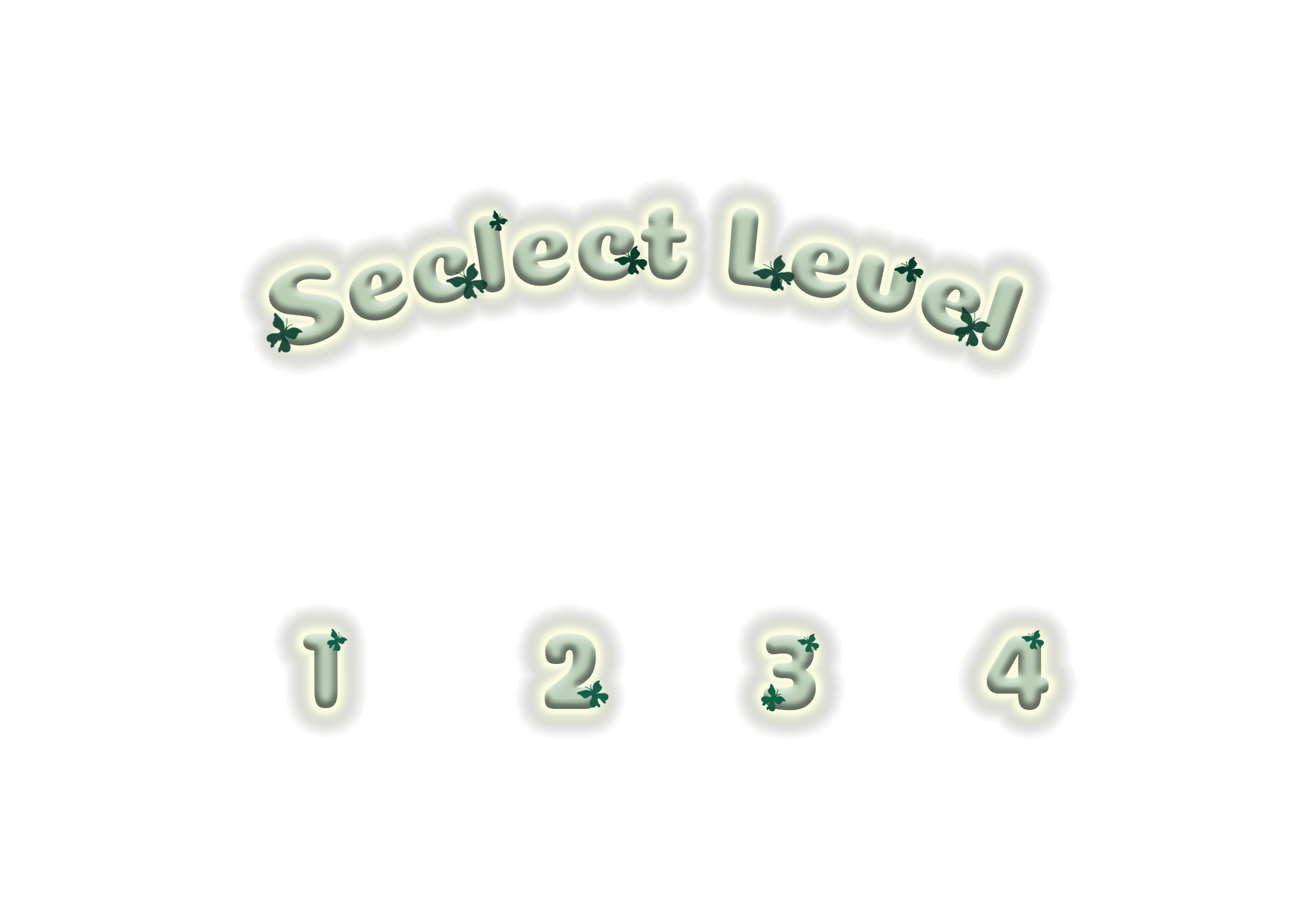
<style>
.page{position:relative;width:1292px;height:923px;background:#ffffff}
.page>*{position:absolute;margin:0}
.t1{font:112.3px "Coiny-Regular";scale:0.89 1}
</style>
<div class="page">
<p class="t1" style="left:269px;top:207px;width:754px;height:144px">Seclect Level</p>
<p class="t1" style="left:303px;top:633px;width:35px;height:75px">1</p>
<p class="t1" style="left:545px;top:633px;width:51px;height:76px">2</p>
<p class="t1" style="left:764px;top:634px;width:52px;height:77px">3</p>
<p class="t1" style="left:986px;top:635px;width:63px;height:75px">4</p>
</div>
